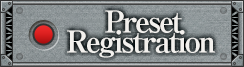
<style>
.page{position:relative;width:244px;height:67px}
.page>*{position:absolute;margin:0}
.t1{font:30px/20px "RyuminPro-ExBold";letter-spacing:-0.08em;color:#f2f0ed}
</style>
<div class="page">
<p class="t1" style="left:67px;top:10px;width:148px;height:48px;text-align:center">Preset<br>Registration</p>
</div>
